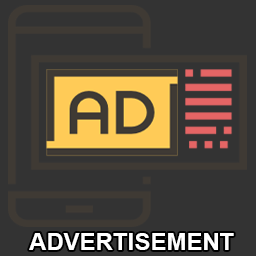
<style>
.page{position:relative;width:256px;height:256px;background:#333333}
.page>*{position:absolute;margin:0}
.t1{font:24px "Arial-BoldMT";color:#ffffff}
</style>
<div class="page">
<p class="t1" style="left:29px;top:233px;width:205px;height:17px">ADVERTISEMENT</p>
</div>
